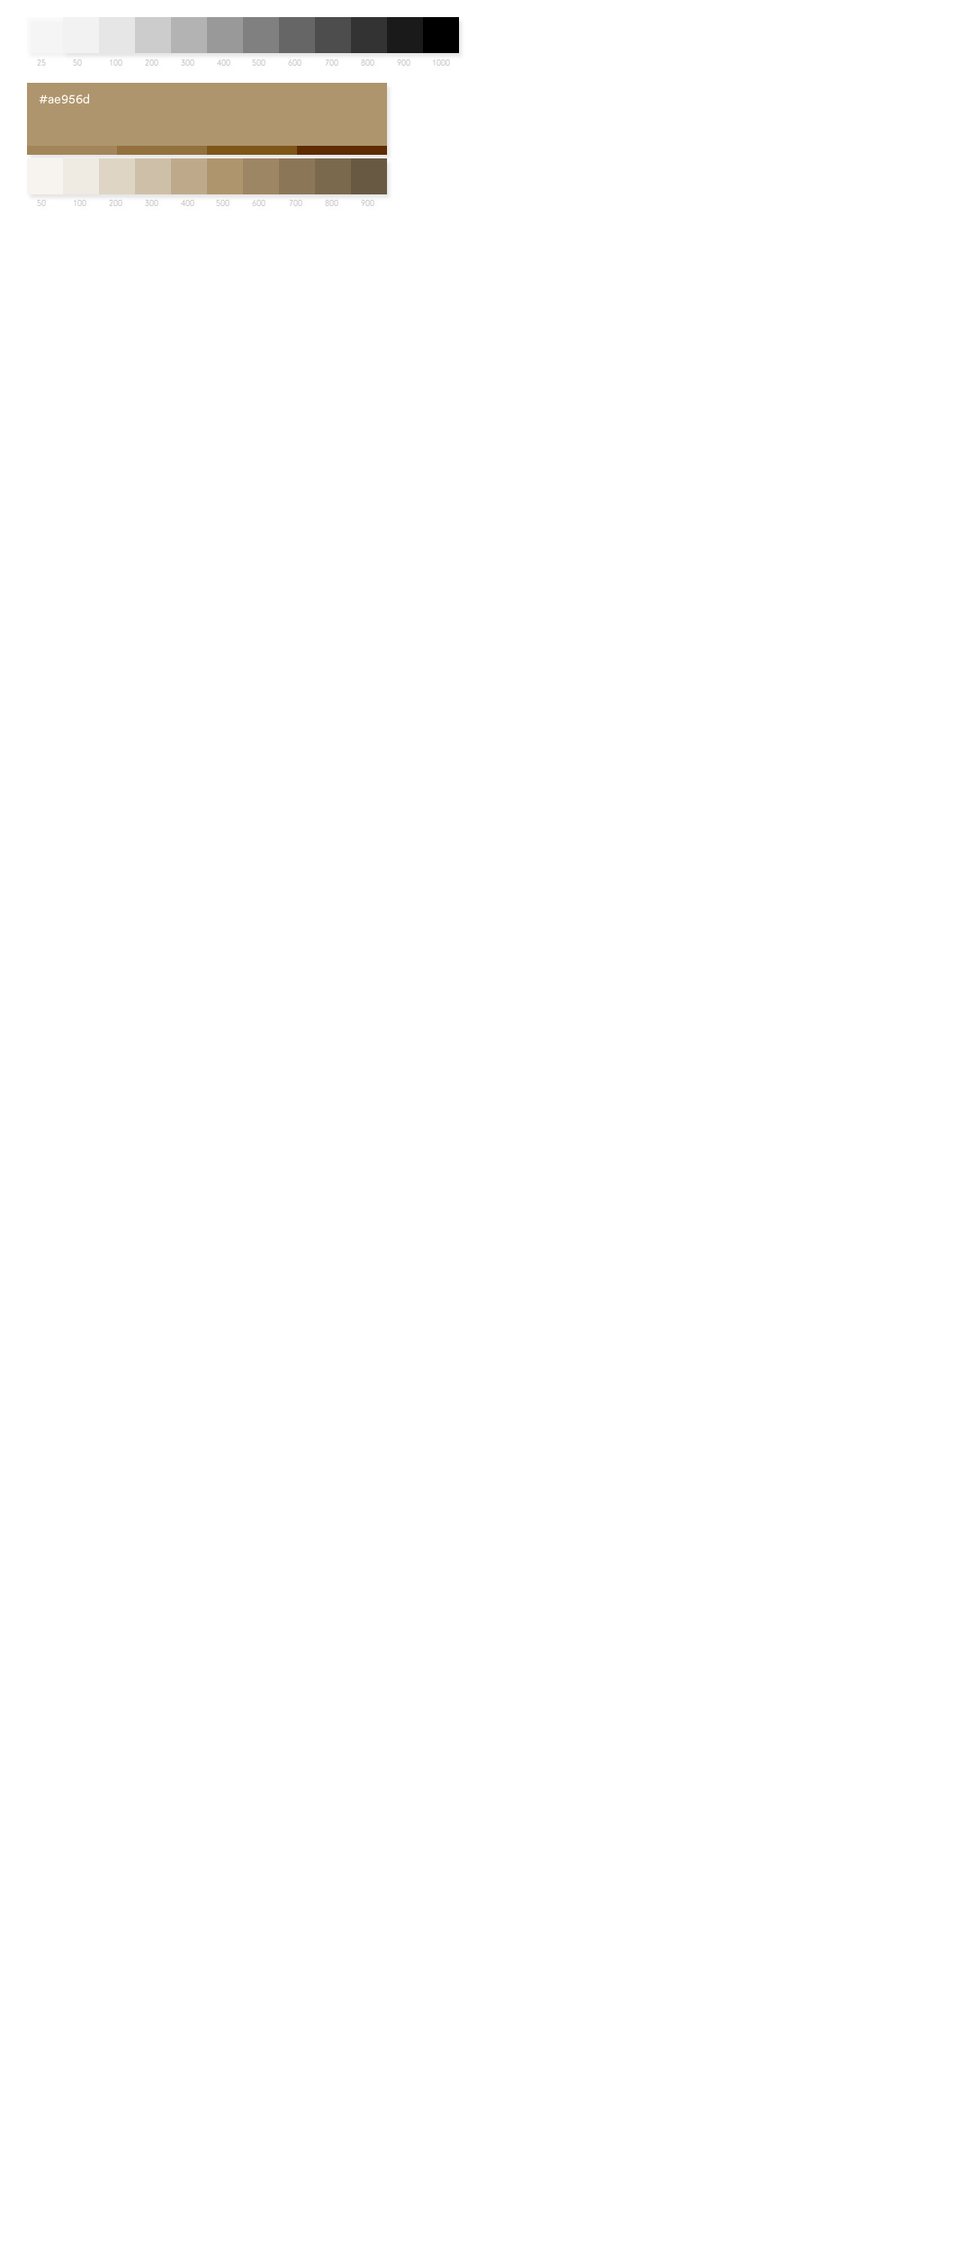
<style>
.page{position:relative;width:972px;height:2250px;background:#ffffff}
.page>*{position:absolute;margin:0}
.t1{font:9px "NeuzeitGro-Reg"}
.t2{font:12.6px "CircularStd-Book";color:#fffcf2}
</style>
<div class="page">
<p class="t1" style="left:37px;top:59px;width:9px;height:7px">25</p>
<p class="t1" style="left:73px;top:59px;width:9px;height:7px">50</p>
<p class="t1" style="left:110px;top:59px;width:12px;height:7px">100</p>
<p class="t1" style="left:145px;top:59px;width:13px;height:7px">200</p>
<p class="t1" style="left:181px;top:59px;width:13px;height:7px">300</p>
<p class="t1" style="left:217px;top:58px;width:13px;height:8px">400</p>
<p class="t1" style="left:252px;top:59px;width:14px;height:7px">500</p>
<p class="t1" style="left:288px;top:59px;width:14px;height:7px">600</p>
<p class="t1" style="left:325px;top:59px;width:13px;height:7px">700</p>
<p class="t1" style="left:361px;top:59px;width:13px;height:7px">800</p>
<p class="t1" style="left:397px;top:59px;width:13px;height:7px">900</p>
<p class="t1" style="left:433px;top:59px;width:17px;height:7px">1000</p>
<p class="t2" style="left:39px;top:94px;width:50px;height:10px">#ae956d</p>
</div>
